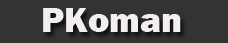
<style>
.page{position:relative;width:228px;height:43px;background:#333333}
.page>*{position:absolute;margin:0}
.t1{font:36px "FranklinGothic-Heavy";color:#f3efef}
</style>
<div class="page">
<p class="t1" style="left:43px;top:8px;width:138px;height:24px">PKoman</p>
</div>
